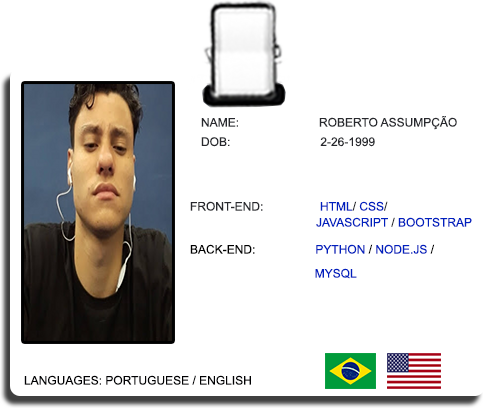
<style>
.page{position:relative;width:485px;height:408px;background:#ffffff}
.page>*{position:absolute;margin:0}
.t1{font:12px "ArialMT";color:#28292e}
.t2{font:12px "ArialMT";color:#0020bf}
.t3{font:12px "ArialMT";color:#000000}
.t4{font:12px "ArialMT";color:#000002}
</style>
<div class="page">
<p class="t1" style="left:201px;top:116px;width:256px;height:14px">NAME:                        ROBERTO ASSUMPÇÃO</p>
<p class="t1" style="left:201px;top:137px;width:174px;height:10px">DOB:                           2-26-1999</p>
<p class="t1" style="left:190px;top:201px;width:198px;height:10px">FRONT-END:                 <span class="t2">HTML</span>/ <span class="t2">CSS</span>/</p>
<p class="t2" style="left:316px;top:217px;width:156px;height:10px">JAVASCRIPT<span class="t1"> / </span>BOOTSTRAP</p>
<p class="t3" style="left:190px;top:244px;width:245px;height:10px">BACK-END:                  <span class="t2">PYTHON</span> / <span class="t2">NODE.JS </span>/</p>
<p class="t2" style="left:315px;top:268px;width:42px;height:11px">MYSQL</p>
<p class="t4" style="left:24px;top:375px;width:227px;height:10px">LANGUAGES: PORTUGUESE / ENGLISH</p>
</div>
